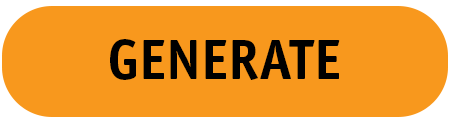
<style>
.page{position:relative;width:450px;height:123px;background:#f8981d}
.page>*{position:absolute;margin:0}
.t1{font:56.3px "OfficinaSansStd-Bold";color:#000000}
</style>
<div class="page">
<p class="t1" style="left:110px;top:39px;width:230px;height:41px">GENERATE</p>
</div>
